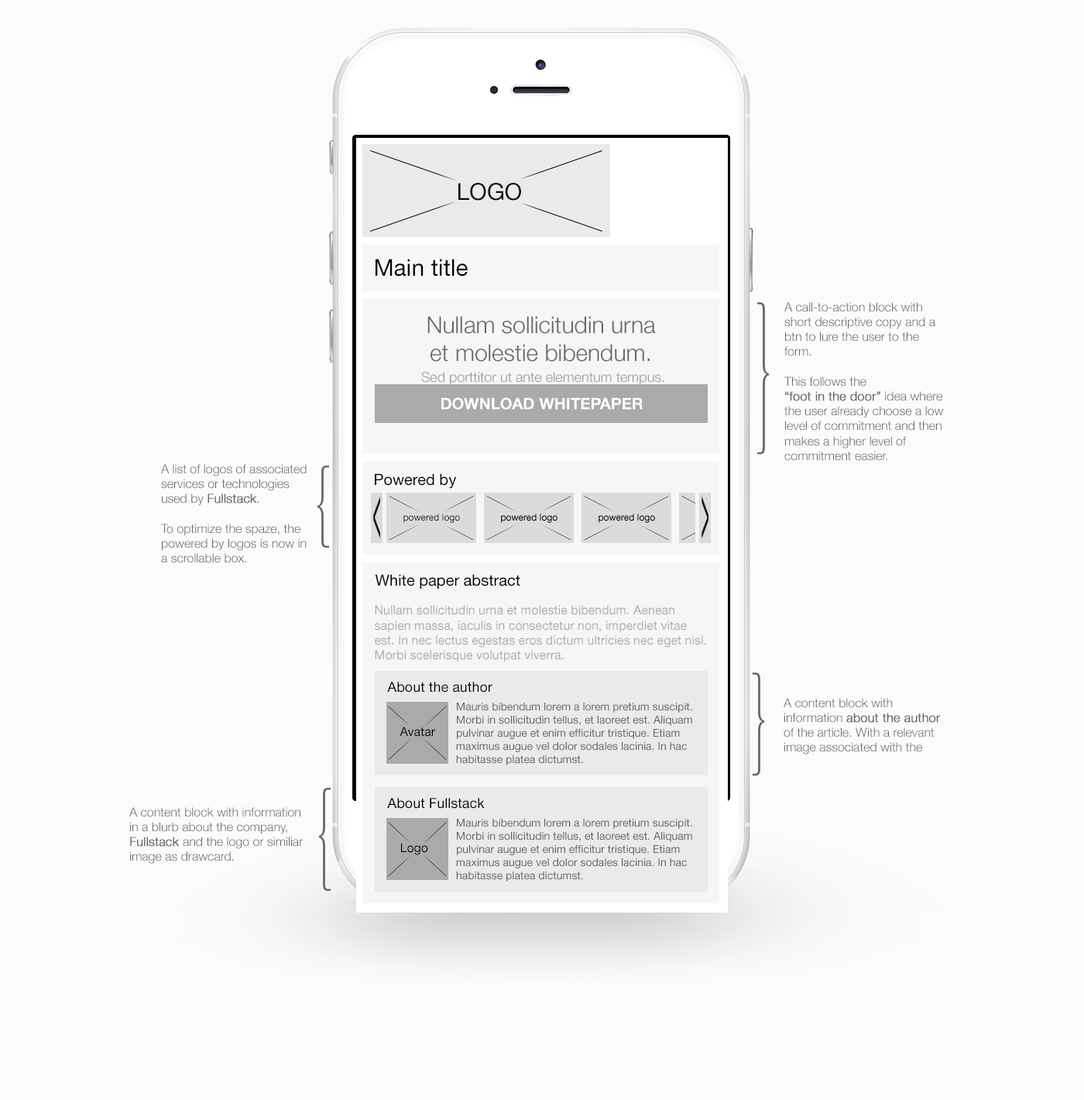
<style>
.page{position:relative;width:1084px;height:1100px;background:#fcfbfb}
.page>*{position:absolute;margin:0}
.t1{font:23.2px "HelveticaNeueLTStd-Roman";color:#000000}
.t2{font:12.4px "HelveticaNeueLTStd-Lt";color:#666666}
.t3{font:12.4px "HelveticaNeueLTStd-Lt";color:#666666;font-weight:bold}
.t4{font:23.2px "HelveticaNeueLTStd-Lt";color:#666666}
.t5{font:13.9px "HelveticaNeueLTStd-Lt";color:#999999}
.t6{font:15.5px "HelveticaNeueLTStd-Md";color:#ffffff;font-weight:bold}
.t7{font:15.5px "HelveticaNeueLTStd-Roman";color:#000000}
.t8{font:9.3px "HelveticaNeueLTStd-Roman";color:#080808}
.t9{font:12.4px "HelveticaNeueLTStd-Roman";color:#aaaaaa}
.t10{font:13.9px "HelveticaNeueLTStd-Roman";color:#000000}
.t11{font:10.8px "HelveticaNeueLTStd-Roman";color:#666666}
.t12{font:12.4px "HelveticaNeueLTStd-Roman";color:#000000}
</style>
<div class="page">
<p class="t1" style="left:458px;top:183px;width:63px;height:18px">LOGO</p>
<p class="t1" style="left:376px;top:259px;width:92px;height:17px">Main title</p>
<p class="t2" style="left:785px;top:302px;width:159px;height:159px">A call-to-action block with short descriptive copy and a btn to lure the user to the form.<br><br>This follows the<br><span class="t3">“foot in the door”</span> idea where the user already choose a low level of commitment and then makes a higher level of commitment easier.</p>
<p class="t4" style="left:428px;top:316px;width:228px;height:46px;text-align:center">Nullam sollicitudin urna<br>et molestie bibendum.</p>
<p class="t5" style="left:421px;top:372px;width:244px;height:13px">Sed porttitor ut ante elementum tempus.</p>
<p class="t6" style="left:441px;top:397px;width:202px;height:13px">DOWNLOAD WHITEPAPER</p>
<p class="t2" style="left:161px;top:464px;width:146px;height:99px">A list of logos of associated services or technologies used by <span class="t3">Fullstack</span>. <br><br>To optimize the spaze, the powered by logos is now in a scrollable box.</p>
<p class="t7" style="left:375px;top:473px;width:82px;height:16px">Powered by</p>
<p class="t8" style="left:404px;top:513px;width:56px;height:10px">powered logo</p>
<p class="t7" style="left:375px;top:574px;width:145px;height:15px">White paper abstract</p>
<p class="t9" style="left:375px;top:605px;width:331px;height:57px">Nullam sollicitudin urna et molestie bibendum. Aenean sapien massa, iaculis in consectetur non, imperdiet vitae est. In nec lectus egestas eros dictum ultricies nec eget nisl. Morbi scelerisque volutpat viverra.</p>
<p class="t10" style="left:387px;top:682px;width:106px;height:10px">About the author</p>
<p class="t2" style="left:784px;top:698px;width:157px;height:56px">A content block with information <span class="t3">about the author</span> of the article. With a relevant image associated with the author.</p>
<p class="t11" style="left:456px;top:702px;width:236px;height:63px">Mauris bibendum lorem a lorem pretium suscipit. Morbi in sollicitudin tellus, et laoreet est. Aliquam pulvinar augue et enim efficitur tristique. Etiam maximus augue vel dolor sodales lacinia. In hac habitasse platea dictumst.</p>
<p class="t12" style="left:400px;top:726px;width:35px;height:11px">Avatar</p>
<p class="t10" style="left:387px;top:798px;width:98px;height:11px">About Fullstack</p>
<p class="t2" style="left:129px;top:807px;width:175px;height:57px">A content block with information in a blurb about the company, <span class="t3">Fullstack </span>and the logo or similiar image as drawcard.</p>
<p class="t11" style="left:456px;top:819px;width:236px;height:62px">Mauris bibendum lorem a lorem pretium suscipit. Morbi in sollicitudin tellus, et laoreet est. Aliquam pulvinar augue et enim efficitur tristique. Etiam maximus augue vel dolor sodales lacinia. In hac habitasse platea dictumst.</p>
<p class="t12" style="left:401px;top:843px;width:27px;height:12px">Logo</p>
</div>
